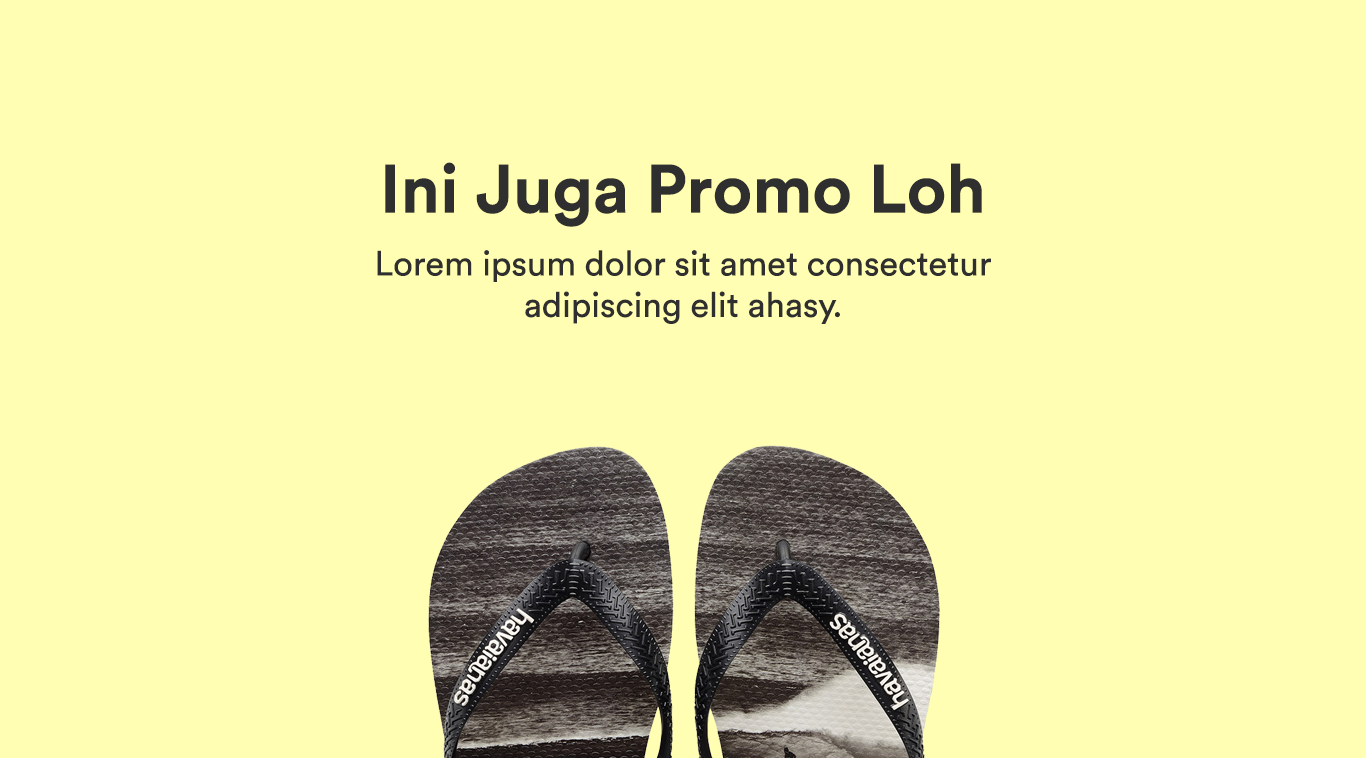
<style>
.page{position:relative;width:1366px;height:758px;background:#fffeb2}
.page>*{position:absolute;margin:0}
.t1{font:34.5px "CircularStd-Book";color:#2f2f2f}
.t2{font:67.8px "CircularStd-Bold";color:#2f2f2f}
</style>
<div class="page">
<p class="t1" style="left:377px;top:162px;width:614px;height:162px;text-align:center"><span class="t2">Ini Juga Promo Loh<br><br></span>Lorem ipsum dolor sit amet consectetur<br>adipiscing elit ahasy.</p>
</div>
